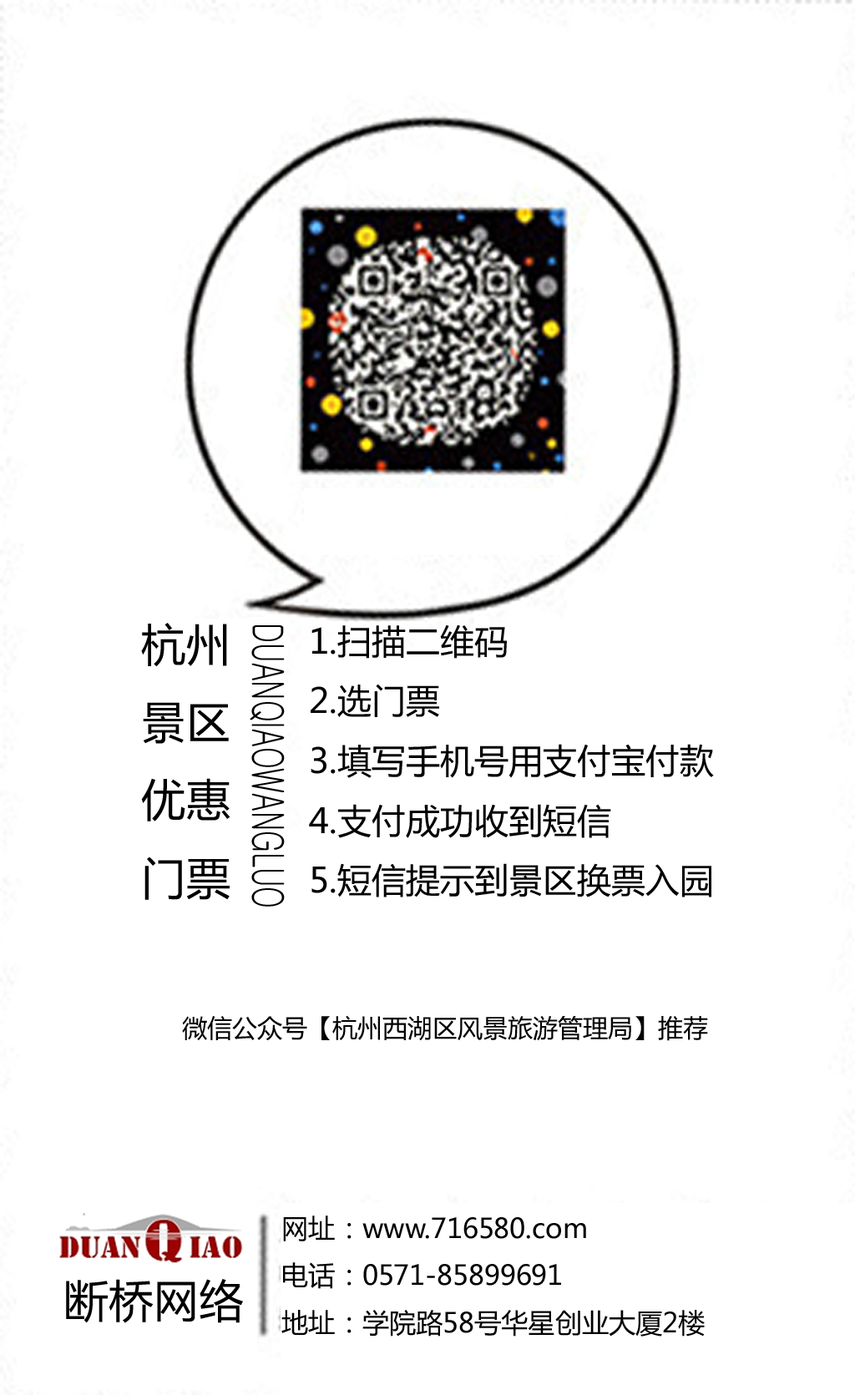
<style>
.page{position:relative;width:855px;height:1395px;background:#ffffff}
.page>*{position:absolute;margin:0}
.t1{font:44.5px "MicrosoftYaHei";color:#000000}
.t2{font:42.9px "Gulim";color:#000000;scale:0.65 1}
.t3{font:34.2px "MicrosoftYaHei";color:#000000}
.t4{font:25px "MicrosoftYaHei";color:#000000}
.t5{font:26.9px "MicrosoftYaHei";color:#000000}
.t6{font:44.9px "MicrosoftYaHei";color:#000000}
</style>
<div class="page">
<p class="t1" style="left:141px;top:623px;width:89px;height:277px">杭州<br>景区<br>优惠<br>门票</p>
<p class="t2" style="left:250px;top:625px;width:35px;height:282px;rotate:90deg">DUANQIAOWANGLUO</p>
<p class="t3" style="left:309px;top:624px;width:405px;height:273px">1.扫描二维码<br>2.选门票<br>3.填写手机号用支付宝付款<br>4.支付成功收到短信<br>5.短信提示到景区换票入园</p>
<p class="t4" style="left:182px;top:1015px;width:526px;height:26px">微信公众号【杭州西湖区风景旅游管理局】推荐</p>
<p class="t5" style="left:281px;top:1215px;width:424px;height:122px">网址：www.716580.com<br>电话：0571-85899691<br>地址：学院路58号华星创业大厦2楼</p>
<p class="t6" style="left:66px;top:1279px;width:177px;height:44px">断桥网络</p>
</div>
